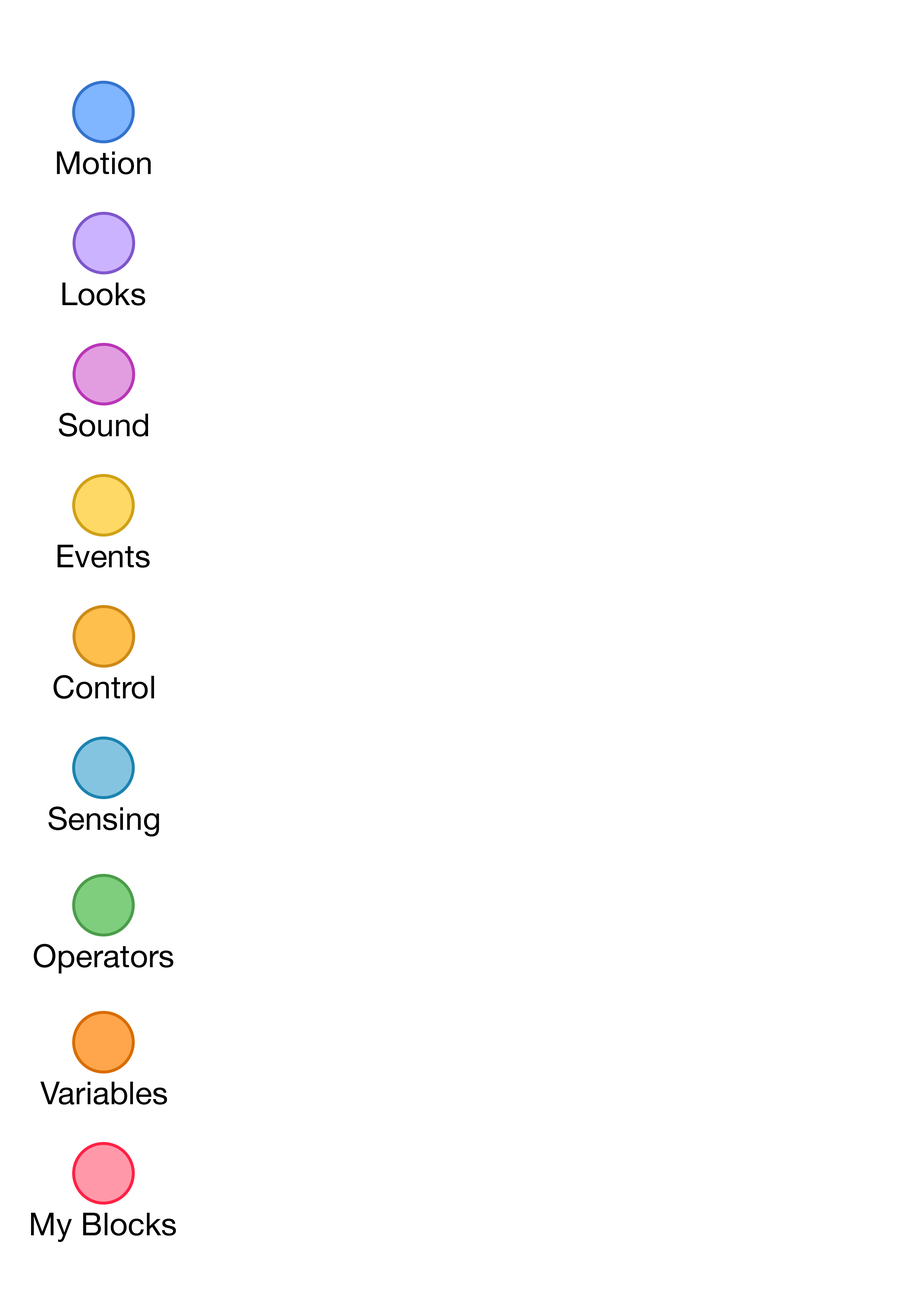
<style>
.page{position:relative;width:918px;height:1299px;background:#ffffff}
.page>*{position:absolute;margin:0}
.t1{font:31.6px "HelveticaNeue";color:#000000}
</style>
<div class="page">
<p class="t1" style="left:57px;top:151px;width:94px;height:23px">Motion</p>
<p class="t1" style="left:62px;top:282px;width:83px;height:23px">Looks</p>
<p class="t1" style="left:59px;top:413px;width:89px;height:23px">Sound</p>
<p class="t1" style="left:57px;top:545px;width:93px;height:23px">Events</p>
<p class="t1" style="left:53px;top:675px;width:101px;height:24px">Control</p>
<p class="t1" style="left:48px;top:806px;width:111px;height:30px">Sensing</p>
<p class="t1" style="left:34px;top:944px;width:140px;height:29px">Operators</p>
<p class="t1" style="left:40px;top:1081px;width:127px;height:23px">Variables</p>
<p class="t1" style="left:31px;top:1212px;width:145px;height:30px">My Blocks</p>
</div>
